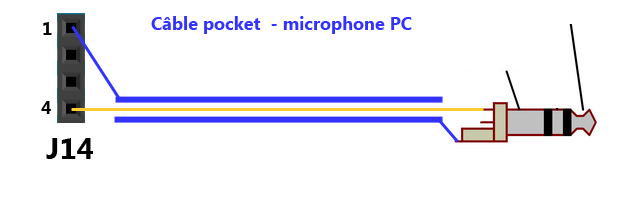
<style>
.page{position:relative;width:620px;height:201px;background:#ffffff}
.page>*{position:absolute;margin:0}
.t1{font:18px "KhmerUI-Bold";color:#3333ff}
.t2{font:18px "KhmerUI-Bold";color:#000000}
.t3{font:30px "KhmerUI-Bold";color:#000000}
</style>
<div class="page">
<p class="t1" style="left:151px;top:16px;width:261px;height:18px">Câble pocket  - microphone PC</p>
<p class="t2" style="left:43px;top:22px;width:9px;height:13px">1</p>
<p class="t2" style="left:41px;top:101px;width:10px;height:13px">4</p>
<p class="t3" style="left:46px;top:138px;width:47px;height:21px">J14</p>
</div>
